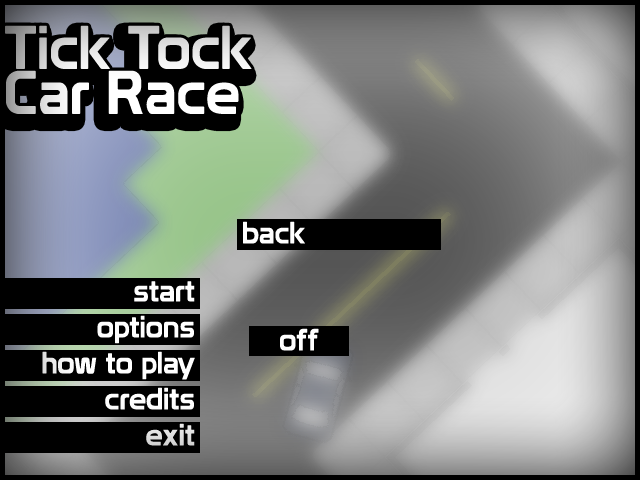
<style>
.page{position:relative;width:640px;height:480px;background:#000000}
.page>*{position:absolute;margin:0}
.t1{font:60px/45px "Prototype"}
.t2{font:30px "Prototype";color:#ffffff}
</style>
<div class="page">
<p class="t1" style="left:5px;top:25px;width:247px;height:89px">Tick Tock<br>Car Race</p>
<p class="t2" style="left:243px;top:221px;width:62px;height:23px">back</p>
<p class="t2" style="left:42px;top:281px;width:153px;height:165px;text-align:right">start<br>options<br>how to play<br>credits<br>exit</p>
<p class="t2" style="left:280px;top:328px;width:39px;height:23px">off</p>
</div>
